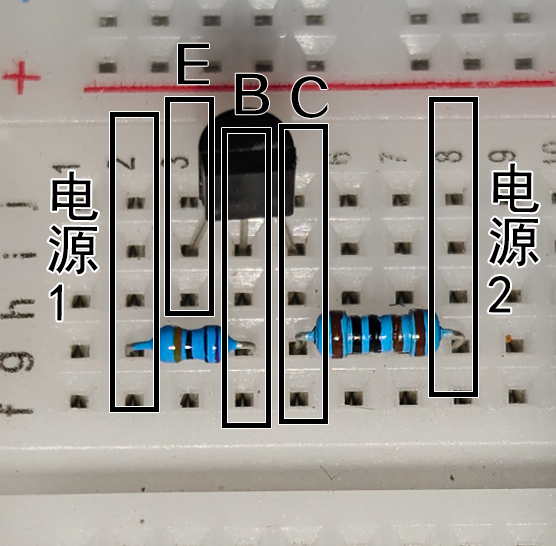
<style>
.page{position:relative;width:556px;height:546px}
.page>*{position:absolute;margin:0}
.t1{font:48px "FZZZHONGJW--GB1-0";color:#000000}
.t2{font:53.3px/53.3px "SimHei";color:#000000}
</style>
<div class="page">
<p class="t1" style="left:178px;top:43px;width:31px;height:42px">E</p>
<p class="t1" style="left:235px;top:73px;width:34px;height:42px">B</p>
<p class="t1" style="left:291px;top:76px;width:37px;height:42px">C</p>
<p class="t2" style="left:48px;top:171px;width:50px;height:150px;rotate:1deg">电<br>源<br>1</p>
<p class="t2" style="left:488px;top:163px;width:51px;height:150px;rotate:1deg">电<br>源<br>2</p>
</div>
